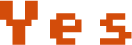
<style>
.page{position:relative;width:132px;height:45px;background:#ffffff}
.page>*{position:absolute;margin:0}
.t1{font:50px "PressStartReg";color:#d34c0a}
</style>
<div class="page">
<p class="t1" style="left:0px;top:0px;width:132px;height:45px">Yes</p>
</div>
